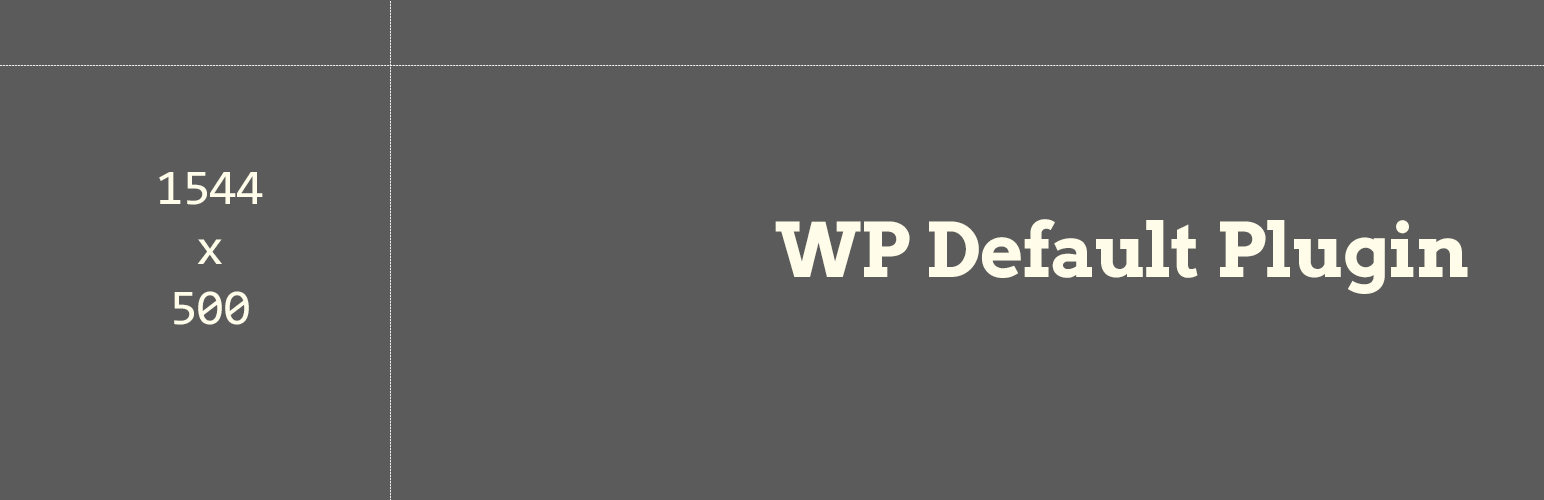
<style>
.page{position:relative;width:1544px;height:500px;background:#5b5b5b}
.page>*{position:absolute;margin:0}
.t1{font:50px "Consolas";letter-spacing:-0.02em;color:#fffdea}
.t2{font:75px "ArvoGr00FCn";letter-spacing:-0.02em;color:#fffdea}
</style>
<div class="page">
<p class="t1" style="left:159px;top:172px;width:104px;height:153px;text-align:center">1544<br>x<br>500</p>
<p class="t2" style="left:775px;top:219px;width:693px;height:75px">WP Default Plugin</p>
</div>
